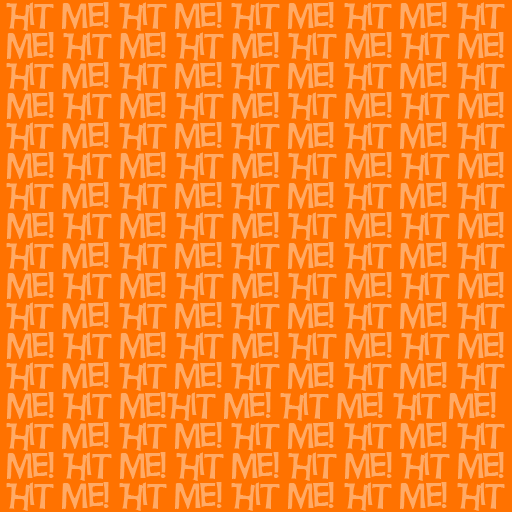
<style>
.page{position:relative;width:512px;height:512px;background:#ff7200}
.page>*{position:absolute;margin:0}
.t1{font:34px/30px "HurryUp";letter-spacing:-0.025em;color:#ffaa66}
</style>
<div class="page">
<p class="t1" style="left:6px;top:2px;width:499px;height:509px">Hit me! Hit me! Hit me! Hit me! Hit me! Hit me! Hit me! Hit me! Hit me! Hit me! Hit me! Hit me! Hit me! Hit me! Hit me! Hit me! Hit me! Hit me! Hit me! Hit me! Hit me! Hit me! Hit me! Hit me! Hit me! Hit me! Hit me! Hit me! Hit me! Hit me! Hit me! Hit me! Hit me! Hit me! Hit me! Hit me! Hit me! Hit me! Hit me! Hit me! Hit me! Hit me! Hit me! Hit me! Hit me! Hit me! Hit me! Hit me! Hit me! Hit me! Hit me! Hit me! Hit me! Hit me! Hit me! Hit me! Hit me! Hit me! Hit me! Hit me!Hit me! Hit me! Hit me! Hit me! Hit me! Hit me! Hit me! Hit me! Hit me! Hit me! Hit me! Hit me! Hit me! Hit me! Hit me! Hit me! Hit me! Hit me! Hit me! Hit me!</p>
</div>
